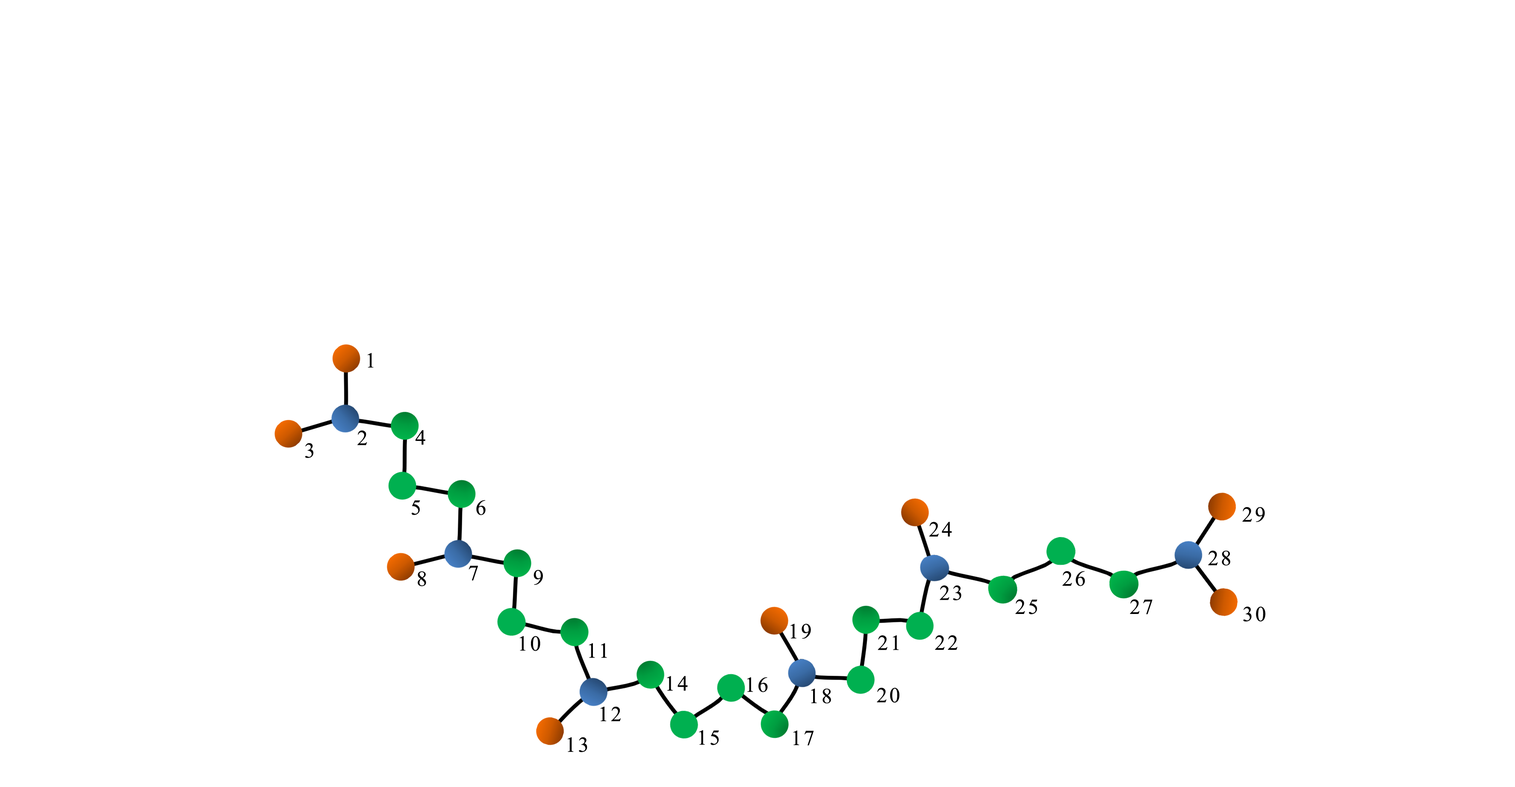
<style>
.page{position:relative;width:1515px;height:787px;background:#ffffff}
.page>*{position:absolute;margin:0}
.t1{font:21.4px "TimesNewRomanPSMT";letter-spacing:0.1em;color:#000000}
</style>
<div class="page">
<p class="t1" style="left:368px;top:353px;width:6px;height:15px">1</p>
<p class="t1" style="left:357px;top:430px;width:10px;height:15px">2</p>
<p class="t1" style="left:415px;top:430px;width:10px;height:15px">4</p>
<p class="t1" style="left:305px;top:443px;width:8px;height:15px">3</p>
<p class="t1" style="left:411px;top:500px;width:9px;height:15px">5</p>
<p class="t1" style="left:476px;top:500px;width:10px;height:15px">6</p>
<p class="t1" style="left:1242px;top:507px;width:23px;height:15px">29</p>
<p class="t1" style="left:929px;top:522px;width:23px;height:15px">24</p>
<p class="t1" style="left:1208px;top:550px;width:22px;height:16px">28</p>
<p class="t1" style="left:468px;top:566px;width:10px;height:15px">7</p>
<p class="t1" style="left:418px;top:571px;width:8px;height:15px">8</p>
<p class="t1" style="left:533px;top:570px;width:10px;height:15px">9</p>
<p class="t1" style="left:1062px;top:571px;width:23px;height:15px">26</p>
<p class="t1" style="left:939px;top:586px;width:22px;height:14px">23</p>
<p class="t1" style="left:1015px;top:599px;width:22px;height:16px">25</p>
<p class="t1" style="left:1130px;top:599px;width:22px;height:16px">27</p>
<p class="t1" style="left:1243px;top:606px;width:22px;height:16px">30</p>
<p class="t1" style="left:790px;top:624px;width:21px;height:15px">19</p>
<p class="t1" style="left:520px;top:636px;width:20px;height:15px">10</p>
<p class="t1" style="left:877px;top:636px;width:21px;height:14px">21</p>
<p class="t1" style="left:935px;top:635px;width:22px;height:15px">22</p>
<p class="t1" style="left:589px;top:643px;width:18px;height:15px">11</p>
<p class="t1" style="left:667px;top:676px;width:21px;height:15px">14</p>
<p class="t1" style="left:747px;top:677px;width:21px;height:15px">16</p>
<p class="t1" style="left:811px;top:689px;width:20px;height:15px">18</p>
<p class="t1" style="left:877px;top:688px;width:22px;height:15px">20</p>
<p class="t1" style="left:600px;top:707px;width:21px;height:14px">12</p>
<p class="t1" style="left:568px;top:737px;width:19px;height:16px">13</p>
<p class="t1" style="left:699px;top:730px;width:20px;height:15px">15</p>
<p class="t1" style="left:793px;top:730px;width:21px;height:16px">17</p>
</div>
